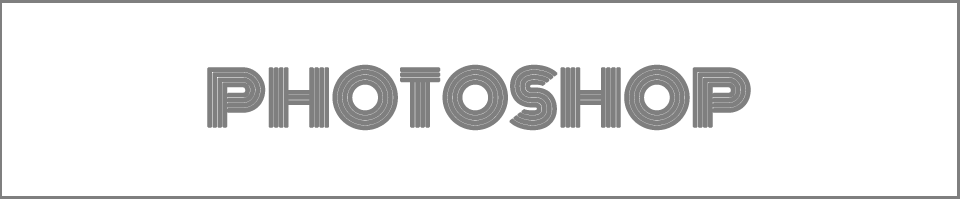
<style>
.page{position:relative;width:960px;height:200px;background:#ffffff}
.page>*{position:absolute;margin:0}
.t1{font:72px "Monoton-Regular";letter-spacing:-0.025em;color:#7f7f7f;text-transform:uppercase;font-weight:bold}
</style>
<div class="page">
<p class="t1" style="left:207px;top:64px;width:544px;height:67px">photoshop</p>
</div>
